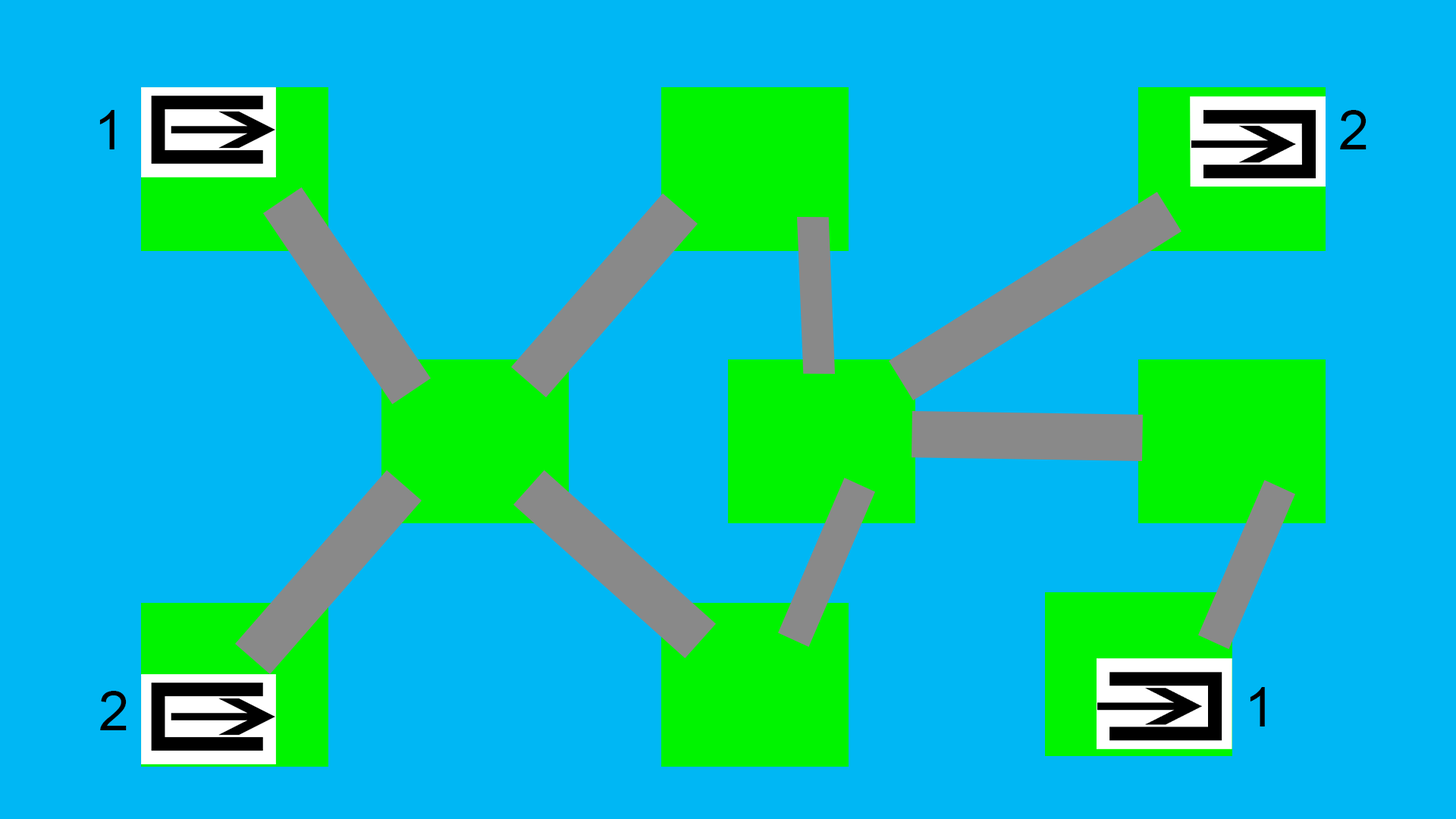
<style>
.page{position:relative;width:1456px;height:819px;background:#00b7f4}
.page>*{position:absolute;margin:0}
.t1{font:54.6px "ArialMT";color:#000000}
</style>
<div class="page">
<p class="t1" style="left:99px;top:110px;width:16px;height:39px">1</p>
<p class="t1" style="left:1340px;top:110px;width:26px;height:39px">2</p>
<p class="t1" style="left:1250px;top:687px;width:15px;height:39px">1</p>
<p class="t1" style="left:100px;top:691px;width:27px;height:39px">2</p>
</div>
